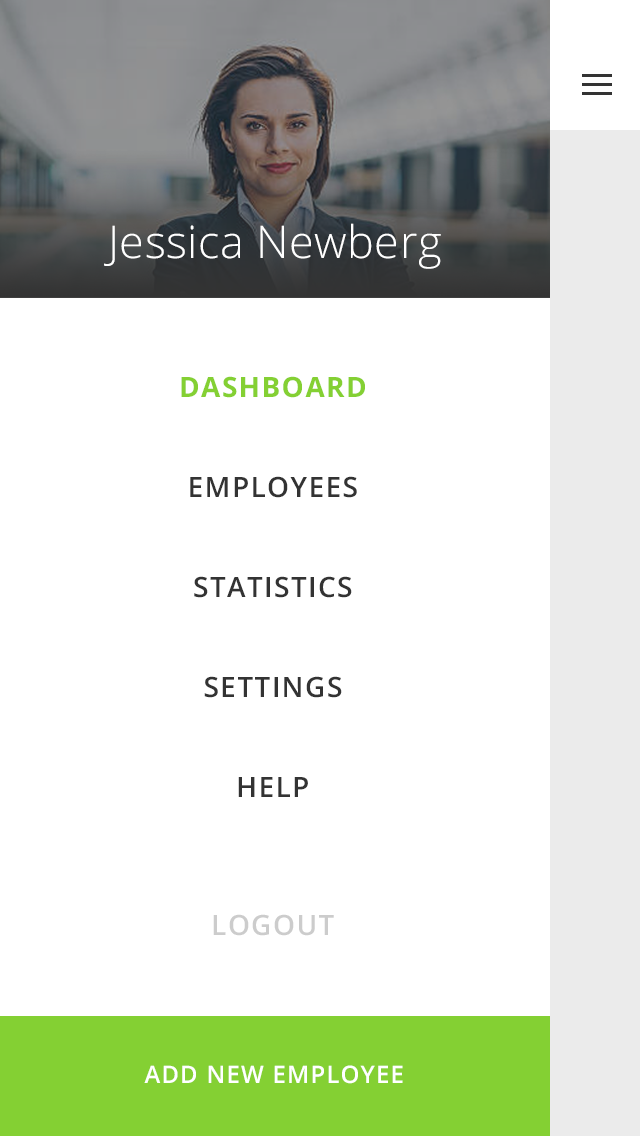
<style>
.page{position:relative;width:640px;height:1136px;background:#ffffff}
.page>*{position:absolute;margin:0}
.t1{font:45px "OpenSans-Light";letter-spacing:0.01em;color:#ffffff}
.t2{font:28px/100px "OpenSans-Semibold";letter-spacing:0.05em;color:#333333;text-transform:uppercase}
.t3{font:28px/100px "OpenSans-Bold";letter-spacing:0.05em;color:#84d033;text-transform:uppercase}
.t4{font:28px/138px "OpenSans-Semibold";letter-spacing:0.05em;color:#cccccc;text-transform:uppercase}
.t5{font:24px "OpenSans-Semibold";letter-spacing:0.05em;color:#ffffff;text-transform:uppercase}
</style>
<div class="page">
<p class="t1" style="left:104px;top:223px;width:337px;height:46px">Jessica Newberg</p>
<p class="t2" style="left:181px;top:376px;width:184px;height:560px;text-align:center"><span class="t3">DASHBOARD<br></span>EMPLOYEES<br>STATISTICS<br>settings<br>help<br><span class="t4">LOGOUT</span></p>
<p class="t5" style="left:144px;top:1065px;width:259px;height:19px">ADD NEW EMPLOYEE</p>
</div>
